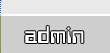
<style>
.page{position:relative;width:110px;height:53px;background:#cecece}
.page>*{position:absolute;margin:0}
.t1{font:24px "OrbitBbyBT-Regular";color:#ffffff}
</style>
<div class="page">
<p class="t1" style="left:25px;top:26px;width:59px;height:17px">admin</p>
</div>
